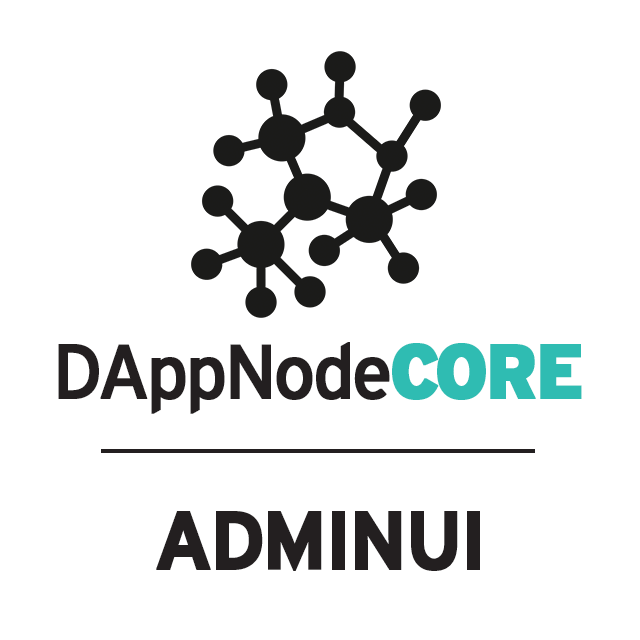
<style>
.page{position:relative;width:640px;height:640px;background:#ffffff}
.page>*{position:absolute;margin:0}
.t1{font:76.5px "Interstate-Regular";letter-spacing:-0.06em;color:#231f20;font-weight:bold;scale:0.95 1}
.t2{font:76.5px "Interstate-Black";letter-spacing:-0.06em;color:#2fbcb2;font-weight:bold;scale:0.95 1}
.t3{font:82.6px "Interstate-Bold";letter-spacing:-0.06em;color:#231f20;font-weight:bold;scale:0.95 1}
</style>
<div class="page">
<p class="t1" style="left:58px;top:342px;width:524px;height:72px">DAppNode<span class="t2">CORE</span></p>
<p class="t3" style="left:156px;top:511px;width:324px;height:60px">ADMINUI</p>
</div>
